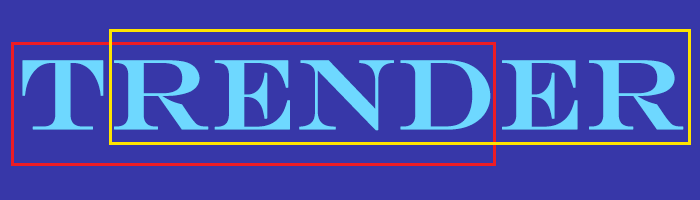
<style>
.page{position:relative;width:700px;height:200px;background:#3737a8}
.page>*{position:absolute;margin:0}
.t1{font:100px "EngraversMT";color:#6ed8ff;font-weight:bold}
</style>
<div class="page">
<p class="t1" style="left:22px;top:60px;width:662px;height:71px">trender</p>
</div>
